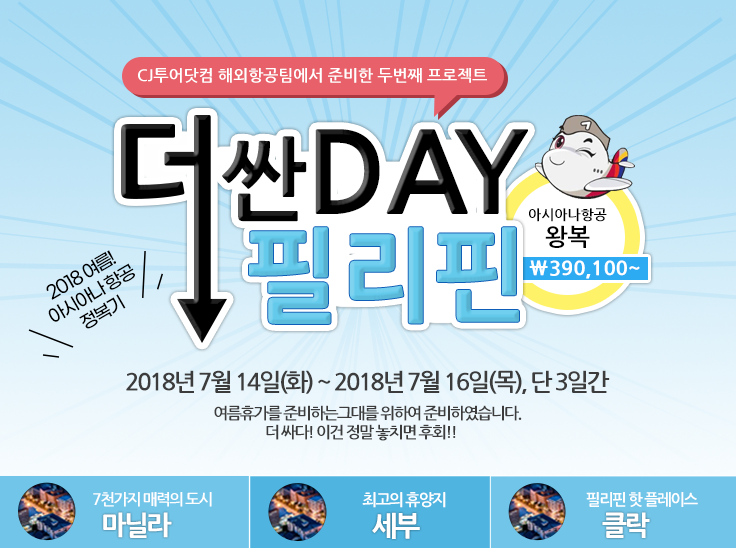
<style>
.page{position:relative;width:736px;height:548px}
.page>*{position:absolute;margin:0}
.t1{font:16px "NanumGothicBold";color:#ffffff}
.t2{font:110px "NanumGothicExtraBold";color:#000000}
.t3{font:90px "NanumGothicExtraBold";color:#000000}
.t4{font:14px "NanumGothicBold";color:#000000}
.t5{font:100px "NanumGothicExtraBold";color:#63caec}
.t6{font:24px "NanumGothicBold";color:#000000}
.t7{font:18px "GmarketSansMedium";letter-spacing:-0.1em;color:#000000}
.t8{font:20px "NanumGothicExtraBold";color:#ffffff}
.t9{font:24px "NanumGothicBold";letter-spacing:-0.1em;color:#3c3c3c}
.t10{font:16px "NanumGothicBold";letter-spacing:-0.1em;color:#3c3c3c}
.t11{font:15.8px "NanumGothicBold";letter-spacing:-0.1em;color:#ffffff}
.t12{font:15.9px "NanumGothicBold";letter-spacing:-0.1em;color:#ffffff}
.t13{font:15.7px "NanumGothicBold";letter-spacing:-0.1em;color:#ffffff}
.t14{font:27px "NanumGothicExtraBold";letter-spacing:-0.1em;color:#ffffff}
.t15{font:27.3px "NanumGothicExtraBold";letter-spacing:-0.1em;color:#ffffff}
.t16{font:26.8px "NanumGothicExtraBold";letter-spacing:-0.1em;color:#ffffff}
</style>
<div class="page">
<p class="t1" style="left:138px;top:68px;width:349px;height:15px">CJ투어닷컴 해외항공팀에서 준비한 두번째 프로젝트</p>
<p class="t2" style="left:222px;top:129px;width:306px;height:93px"><span class="t3">싼</span>DAY</p>
<p class="t4" style="left:529px;top:208px;width:78px;height:14px">아시아나항공</p>
<p class="t5" style="left:249px;top:227px;width:270px;height:97px">필리핀</p>
<p class="t6" style="left:545px;top:225px;width:45px;height:23px">왕복</p>
<p class="t7" style="left:46px;top:250px;width:89px;height:79px;text-align:center;rotate:-30deg">2018 여름!<br>아시아나 항공<br>정복기</p>
<p class="t8" style="left:529px;top:260px;width:111px;height:19px">\390,100~</p>
<p class="t9" style="left:126px;top:370px;width:484px;height:24px">2018년 7월 14일(화) ~ 2018년 7월 16일(목), 단 3일간</p>
<p class="t10" style="left:214px;top:405px;width:308px;height:36px;text-align:center">여름휴가를 준비하는그대를 위하여 준비하였습니다.<br>더 싸다! 이건 정말 놓치면 후회!!</p>
<p class="t11" style="left:93px;top:492px;width:119px;height:15px">7천가지 매력의 도시</p>
<p class="t12" style="left:362px;top:492px;width:84px;height:16px">최고의 휴양지</p>
<p class="t13" style="left:586px;top:492px;width:112px;height:15px">필리핀 핫 플레이스</p>
<p class="t14" style="left:103px;top:512px;width:69px;height:26px">마닐라</p>
<p class="t15" style="left:372px;top:512px;width:48px;height:27px">세부</p>
<p class="t16" style="left:602px;top:512px;width:48px;height:26px">클락</p>
</div>
